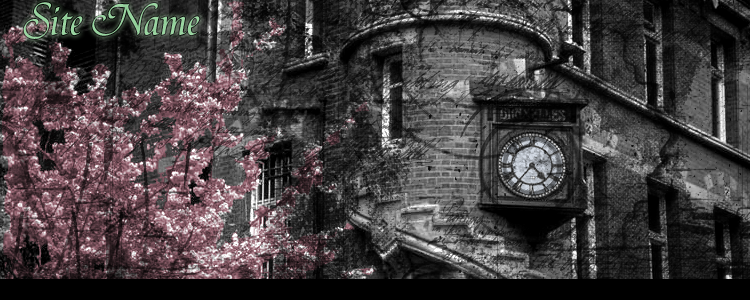
<style>
.page{position:relative;width:750px;height:300px}
.page>*{position:absolute;margin:0}
.t1{font:48px "TirantiSolidLetPlain";letter-spacing:0.005em;color:#9bd6a2}
</style>
<div class="page">
<p class="t1" style="left:23px;top:2px;width:177px;height:37px">Site Name</p>
</div>
